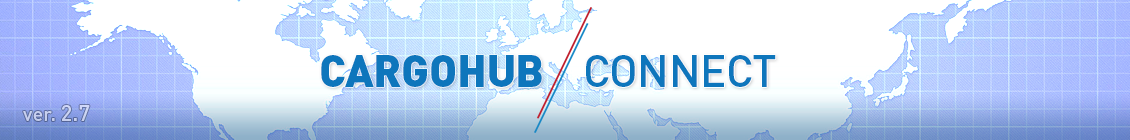
<style>
.page{position:relative;width:1130px;height:140px;background:#ffffff}
.page>*{position:absolute;margin:0}
.t1{font:44px "DINPro-Black";letter-spacing:-0.01em;color:#0e76bc}
.t2{font:44px "DINPro-Medium";letter-spacing:-0.01em;color:#0e76bc;font-variant:small-caps}
.t3{font:19.8px "DINPro-Medium";color:#c7d1f0}
.t4{font:22px "DINPro-Medium";color:#c7d1f0}
</style>
<div class="page">
<p class="t1" style="left:321px;top:55px;width:455px;height:32px">CARGOHUB    <span class="t2">CONNECT</span></p>
<p class="t3" style="left:23px;top:105px;width:67px;height:16px">ver. <span class="t4">2.7</span></p>
</div>
